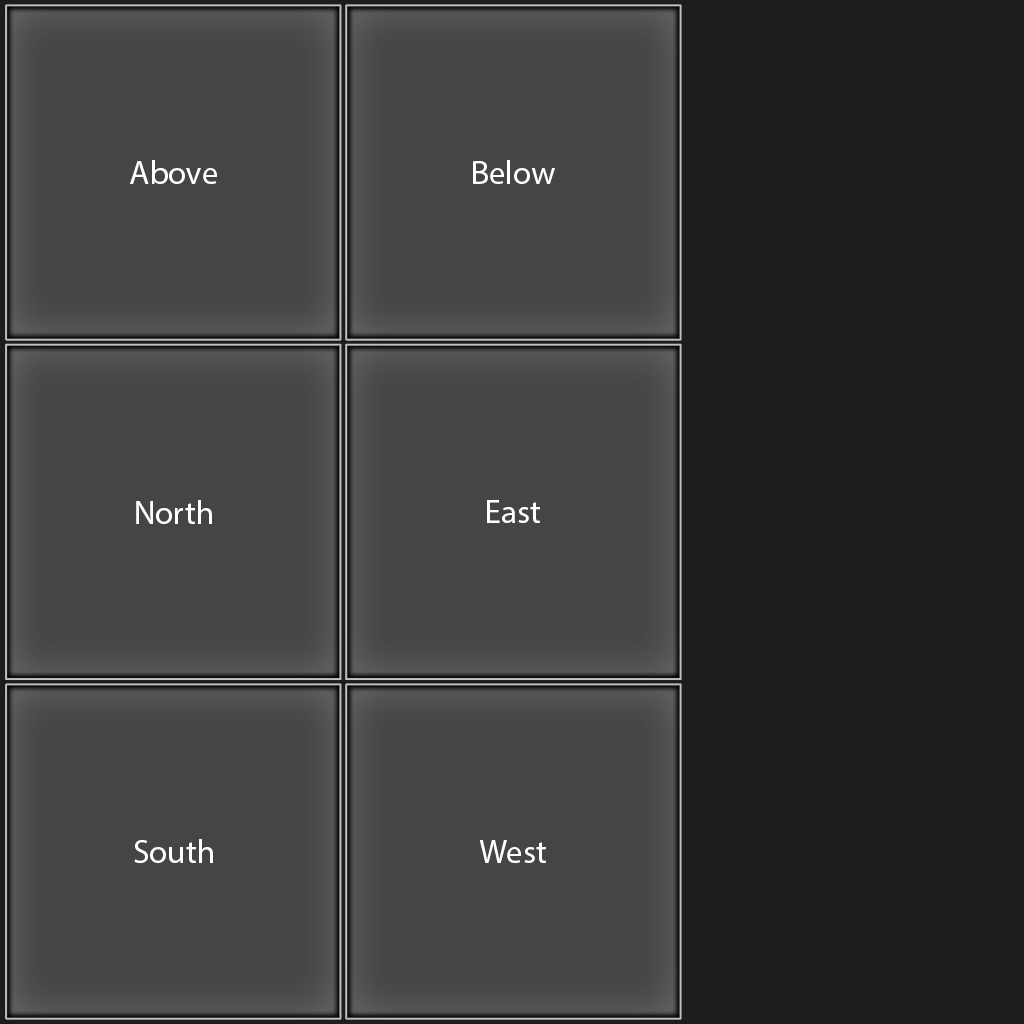
<style>
.page{position:relative;width:1024px;height:1024px;background:#454545}
.page>*{position:absolute;margin:0}
.t1{font:33px "MyriadPro-Regular";color:#ffffff}
</style>
<div class="page">
<p class="t1" style="left:130px;top:160px;width:87px;height:24px">Above</p>
<p class="t1" style="left:473px;top:160px;width:82px;height:24px">Below</p>
<p class="t1" style="left:136px;top:500px;width:76px;height:24px">North</p>
<p class="t1" style="left:487px;top:500px;width:53px;height:23px">East</p>
<p class="t1" style="left:134px;top:839px;width:79px;height:24px">South</p>
<p class="t1" style="left:479px;top:840px;width:67px;height:23px">West</p>
</div>
